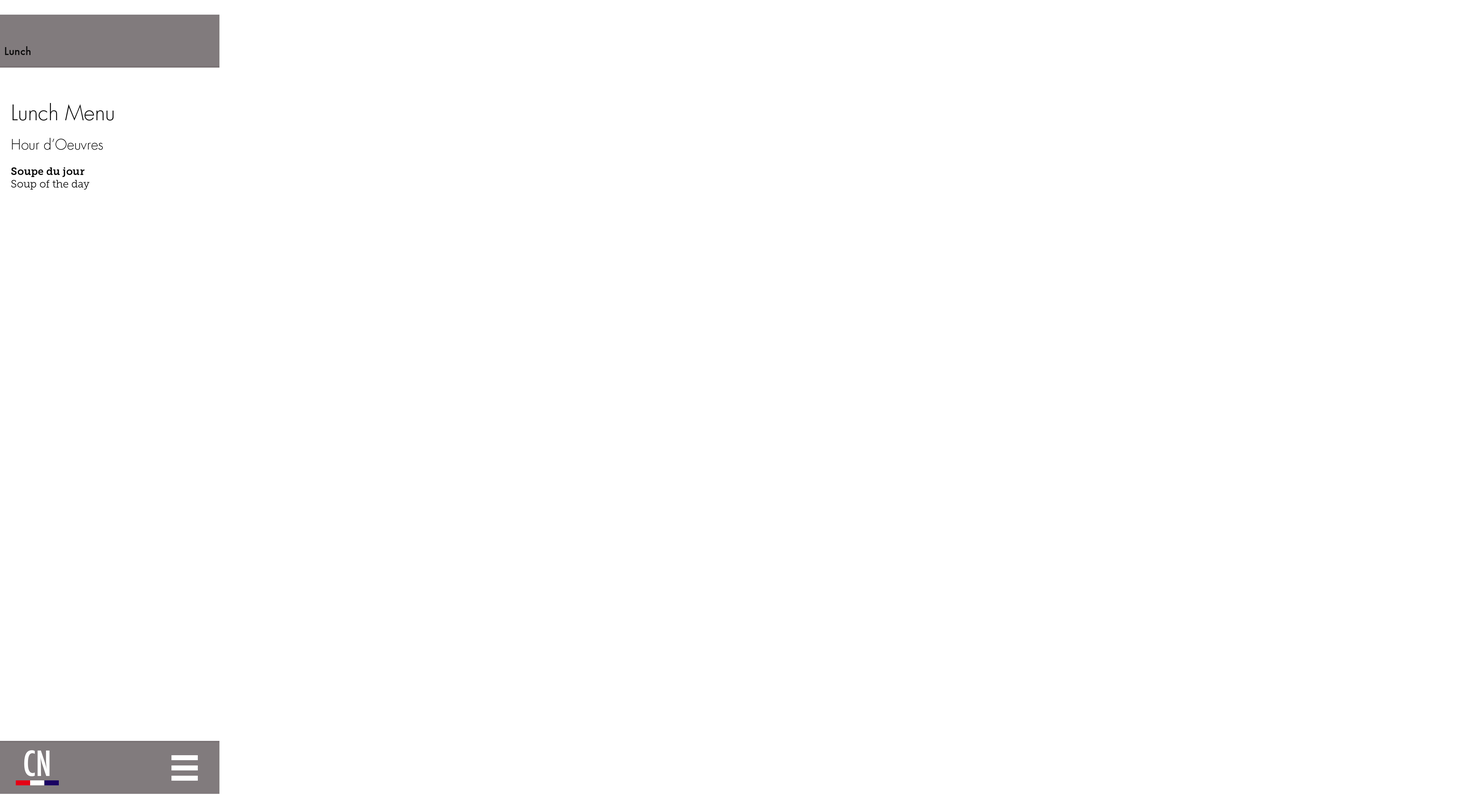
<style>
.page{position:relative;width:1477px;height:807px;background:#ffffff}
.page>*{position:absolute;margin:0}
.t1{font:10.5px "Futura-Medium";color:#0d0d0d}
.t2{font:10.5px "MuseoSlab-300";color:#0d0d0d}
.t3{font:21.1px "Futura-Light";color:#0d0d0d}
.t4{font:14px "Futura-Light";color:#0d0d0d}
.t5{font:10.5px "MuseoSlab-700";color:#0d0d0d}
.t6{font:33.8px "Futura-CondensedMedium";color:#ffffff}
</style>
<div class="page">
<p class="t1" style="left:5px;top:46px;width:26px;height:9px">Lunch</p>
<p class="t2" style="left:11px;top:103px;width:103px;height:87px"><span class="t3">Lunch Menu<br><br></span><span class="t4">Hour d’Oeuvres<br><br></span><span class="t5">Soupe du jour <br></span>Soup of the day</p>
<p class="t6" style="left:24px;top:750px;width:26px;height:26px">CN</p>
</div>
